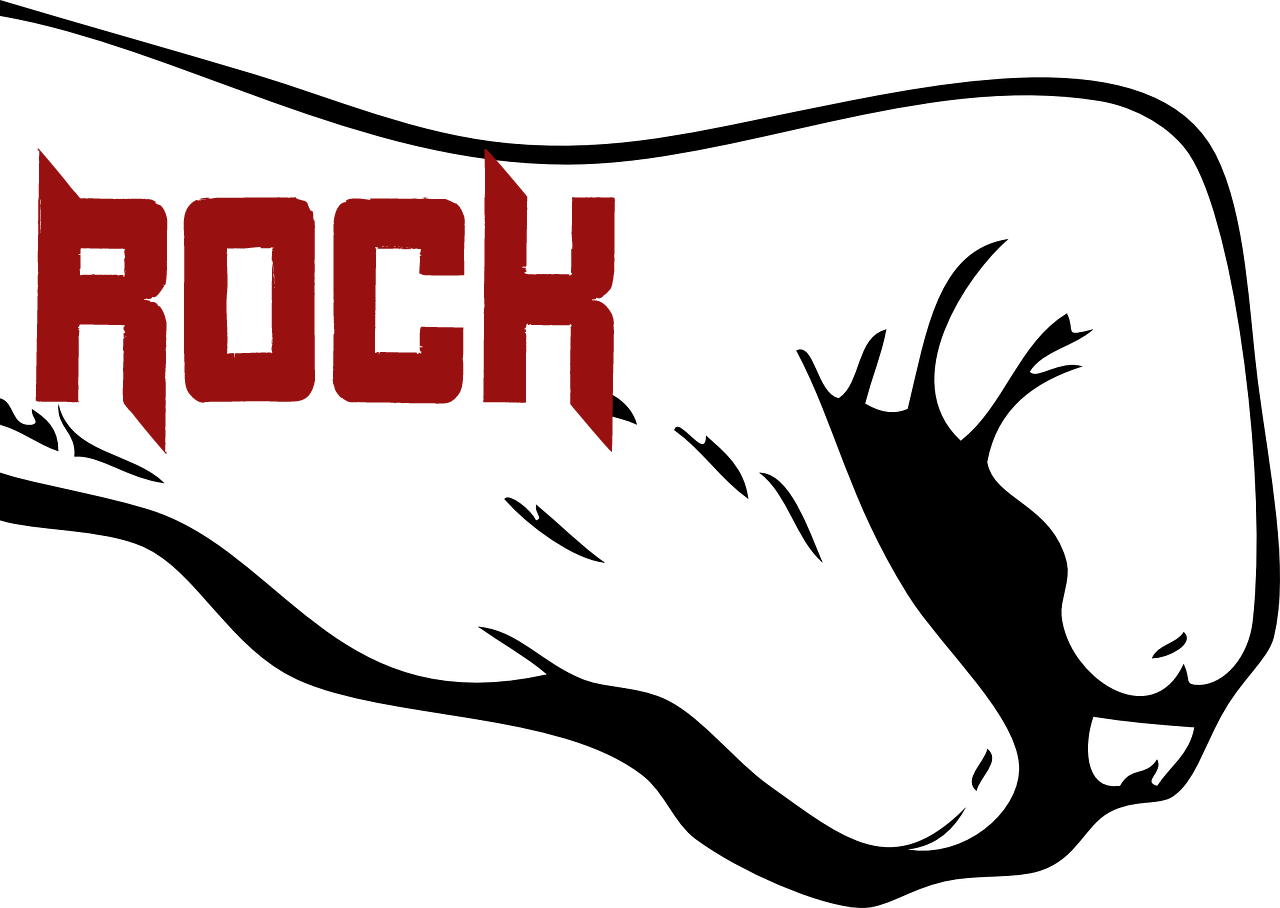
<style>
.page{position:relative;width:1280px;height:908px;background:#ffffff}
.page>*{position:absolute;margin:0}
.t1{font:291.7px "Duplexide";color:#991010;scale:0.85 1}
</style>
<div class="page">
<p class="t1" style="left:35px;top:148px;width:580px;height:306px">ROCK</p>
</div>
